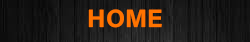
<style>
.page{position:relative;width:250px;height:42px}
.page>*{position:absolute;margin:0}
.t1{font:25px "AcuminConcept-Bold";color:#ff7300}
</style>
<div class="page">
<p class="t1" style="left:88px;top:9px;width:74px;height:19px">HOME</p>
</div>
